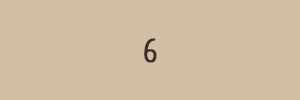
<style>
.page{position:relative;width:300px;height:100px;background:#d1c0a5}
.page>*{position:absolute;margin:0}
.t1{font:30px "NanumBarunpen";letter-spacing:-0.02em;color:#362e2b;font-weight:bold}
</style>
<div class="page">
<p class="t1" style="left:144px;top:38px;width:13px;height:25px">6</p>
</div>
